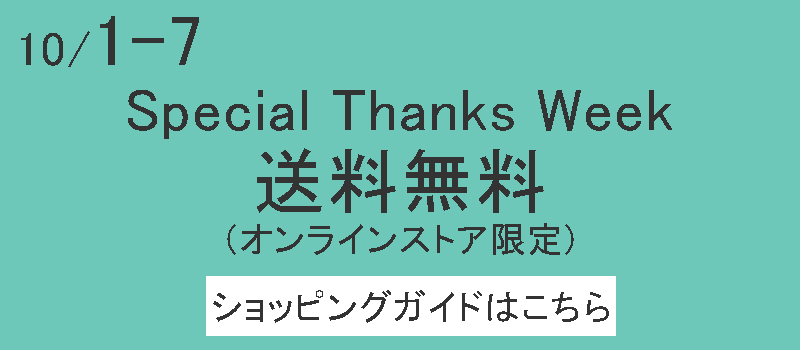
<style>
.page{position:relative;width:800px;height:350px;background:#6ec8b9}
.page>*{position:absolute;margin:0}
.t1{font:48px "MS-PGothic";letter-spacing:0.025em;color:#333333}
.t2{font:72px "MS-PGothic";letter-spacing:0.025em;color:#333333}
.t3{font:60px "MS-PGothic";letter-spacing:0.025em;color:#333333}
.t4{font:36px "MS-PGothic";letter-spacing:0.025em;color:#333333}
</style>
<div class="page">
<p class="t1" style="left:21px;top:16px;width:178px;height:51px">10/<span class="t2">1-7</span></p>
<p class="t3" style="left:128px;top:90px;width:544px;height:49px">Special Thanks Week</p>
<p class="t2" style="left:257px;top:148px;width:287px;height:65px">送料無料</p>
<p class="t4" style="left:227px;top:223px;width:347px;height:32px">（オンラインストア限定)</p>
<p class="t4" style="left:213px;top:290px;width:396px;height:33px">ショッピングガイドはこちら</p>
</div>
